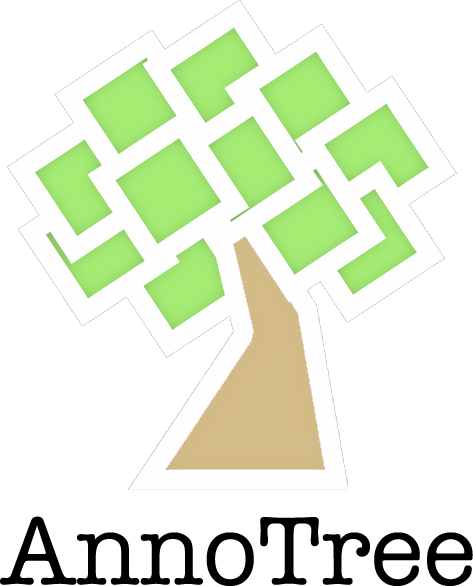
<style>
.page{position:relative;width:473px;height:586px;background:#ffffff}
.page>*{position:absolute;margin:0}
.t1{font:100px "AmericanTypewriter";color:#000000}
</style>
<div class="page">
<p class="t1" style="left:0px;top:516px;width:473px;height:70px">AnnoTree</p>
</div>
